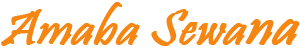
<style>
.page{position:relative;width:300px;height:50px;background:#ffffff}
.page>*{position:absolute;margin:0}
.t1{font:50px "Pristina-Regular";color:#f68612;font-weight:bold;font-style:italic;scale:1.04 1}
.t2{font:58px "Pristina-Regular";color:#f68612;font-weight:bold;font-style:italic;scale:1.04 1}
</style>
<div class="page">
<p class="t1" style="left:1px;top:2px;width:299px;height:44px">Amaba Sewa<span class="t2">na</span></p>
</div>
